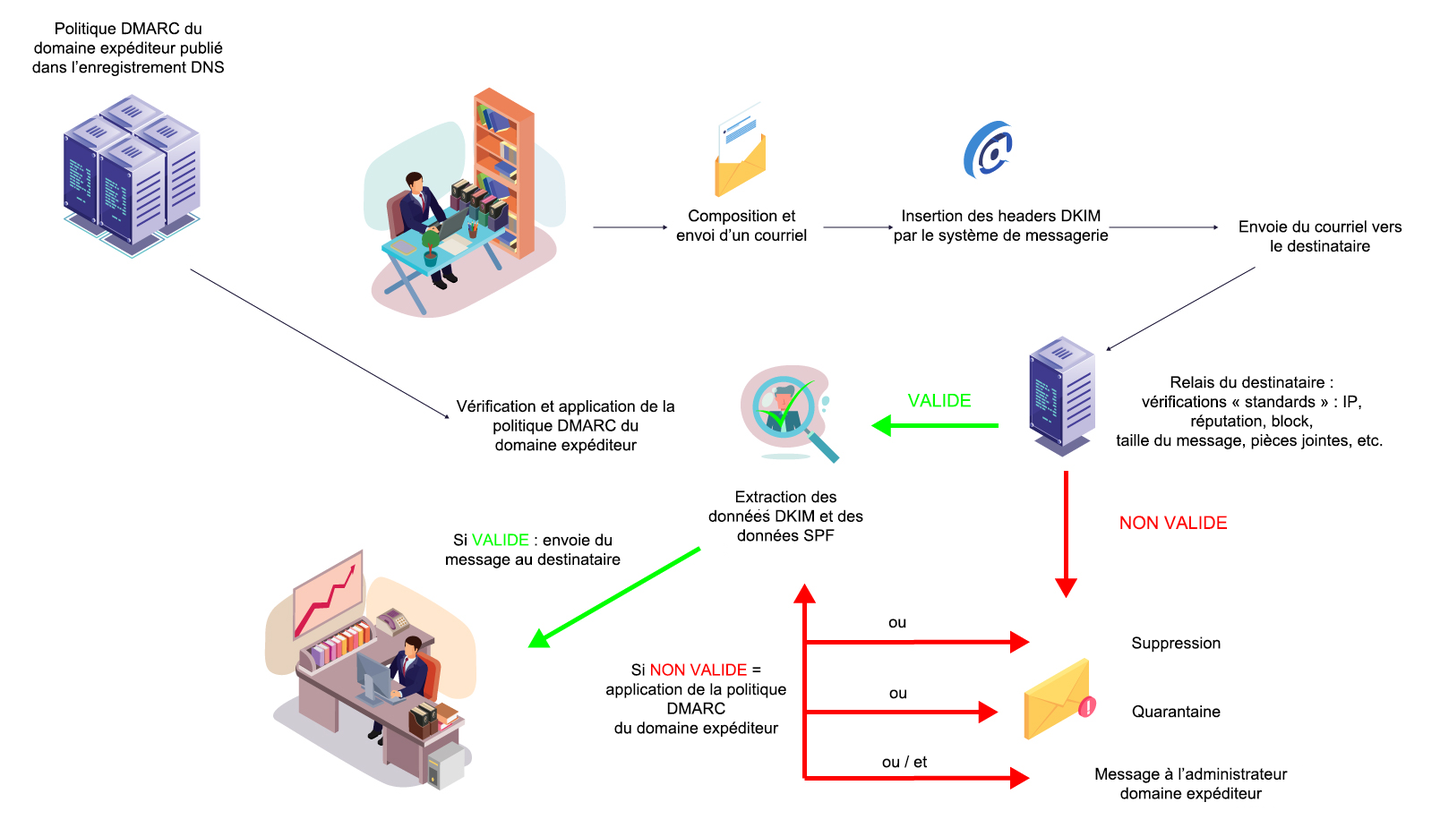
<style>
.page{position:relative;width:1440px;height:828px;background:#ffffff}
.page>*{position:absolute;margin:0}
.t1{font:16.1px "ArialMT";color:#000000}
.t2{font:17.9px "ArialMT";color:#01ff00}
.t3{font:17.9px "ArialMT";color:#fe0000}
.t4{font:16.1px "ArialMT";color:#01ff00}
.t5{font:16.1px "ArialMT";color:#fe0000}
</style>
<div class="page">
<p class="t1" style="left:32px;top:21px;width:192px;height:55px;text-align:center">Politique DMARC du<br>domaine expéditeur publié<br>dans l’enregistrement DNS</p>
<p class="t1" style="left:676px;top:210px;width:131px;height:32px;text-align:center">Composition et<br>envoi d’un courriel</p>
<p class="t1" style="left:894px;top:210px;width:214px;height:34px;text-align:center">Insertion des headers DKIM<br>par le système de messagerie</p>
<p class="t1" style="left:1239px;top:220px;width:163px;height:32px;text-align:center">Envoie du courriel vers<br>le destinataire</p>
<p class="t1" style="left:1116px;top:376px;width:266px;height:73px;text-align:center">Relais du destinataire :<br>vérifications « standards » : IP,<br>réputation, block,<br>taille du message, pièces jointes, etc.</p>
<p class="t1" style="left:456px;top:399px;width:219px;height:55px;text-align:center">Vérification et application de la<br>politique DMARC du<br>domaine expéditeur</p>
<p class="t2" style="left:907px;top:394px;width:64px;height:13px">VALIDE</p>
<p class="t1" style="left:708px;top:491px;width:155px;height:51px;text-align:center">Extraction des<br>données DKIM et des<br>données SPF</p>
<p class="t3" style="left:1120px;top:516px;width:107px;height:14px">NON VALIDE</p>
<p class="t1" style="left:446px;top:534px;width:174px;height:35px;text-align:center">Si <span class="t4">VALIDE</span> : envoie du<br>message au destinataire</p>
<p class="t1" style="left:888px;top:619px;width:18px;height:10px">ou</p>
<p class="t1" style="left:1132px;top:637px;width:88px;height:16px">Suppression</p>
<p class="t1" style="left:605px;top:663px;width:181px;height:74px;text-align:center">Si <span class="t5">NON VALIDE</span> =<br>application de la politique<br>DMARC<br>du domaine expéditeur</p>
<p class="t1" style="left:889px;top:689px;width:17px;height:10px">ou</p>
<p class="t1" style="left:1132px;top:705px;width:88px;height:14px">Quarantaine</p>
<p class="t1" style="left:882px;top:756px;width:46px;height:12px">ou / et</p>
<p class="t1" style="left:1095px;top:767px;width:193px;height:35px;text-align:center">Message à l’administrateur<br>domaine expéditeur</p>
</div>
